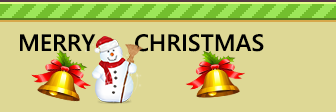
<style>
.page{position:relative;width:336px;height:112px;background:#ded895}
.page>*{position:absolute;margin:0}
.t1{font:23.6px "SegoeWP-Semibold";color:#000000}
</style>
<div class="page">
<p class="t1" style="left:20px;top:34px;width:244px;height:18px">MERRY      CHRISTMAS</p>
</div>
